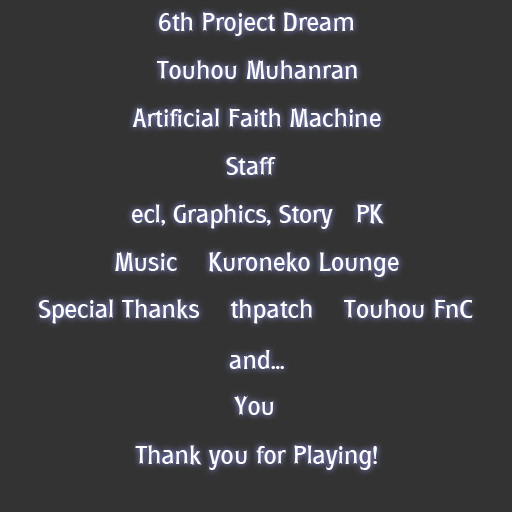
<style>
.page{position:relative;width:512px;height:512px;background:#333333}
.page>*{position:absolute;margin:0}
.t1{font:25.7px "Rynders";color:#ffffff;scale:1.21 1}
</style>
<div class="page">
<p class="t1" style="left:159px;top:11px;width:195px;height:25px">6th Project Dream</p>
<p class="t1" style="left:157px;top:59px;width:201px;height:21px">Touhou Muhanran</p>
<p class="t1" style="left:132px;top:107px;width:249px;height:21px">Artificial Faith Machine</p>
<p class="t1" style="left:226px;top:157px;width:50px;height:19px">Staff</p>
<p class="t1" style="left:132px;top:203px;width:252px;height:26px">ecl, Graphics, Story   PK</p>
<p class="t1" style="left:115px;top:252px;width:284px;height:25px">Music    Kuroneko Lounge</p>
<p class="t1" style="left:39px;top:298px;width:434px;height:26px">Special Thanks    thpatch    Touhou FnC</p>
<p class="t1" style="left:229px;top:350px;width:55px;height:20px">and...</p>
<p class="t1" style="left:234px;top:395px;width:40px;height:21px">You</p>
<p class="t1" style="left:135px;top:444px;width:242px;height:26px">Thank you for Playing!</p>
</div>
